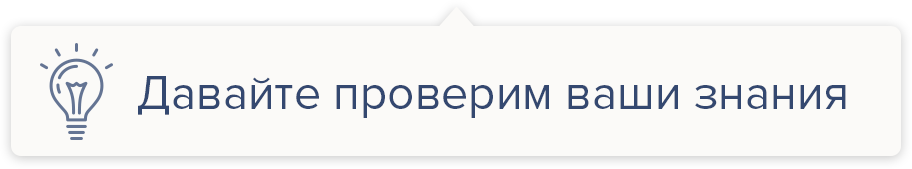
<style>
.page{position:relative;width:912px;height:169px;background:#fbfaf8}
.page>*{position:absolute;margin:0}
.t1{font:48px "ProximaNova-Regular";color:#344870}
</style>
<div class="page">
<p class="t1" style="left:138px;top:76px;width:708px;height:42px">Давайте проверим ваши знания</p>
</div>
